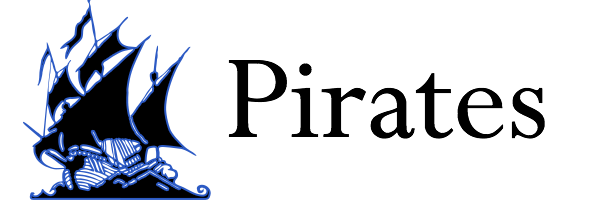
<style>
.page{position:relative;width:600px;height:200px;background:#ffffff}
.page>*{position:absolute;margin:0}
.t1{font:133.3px "Perpetua";color:#000000}
</style>
<div class="page">
<p class="t1" style="left:228px;top:60px;width:317px;height:79px">Pirates</p>
</div>
